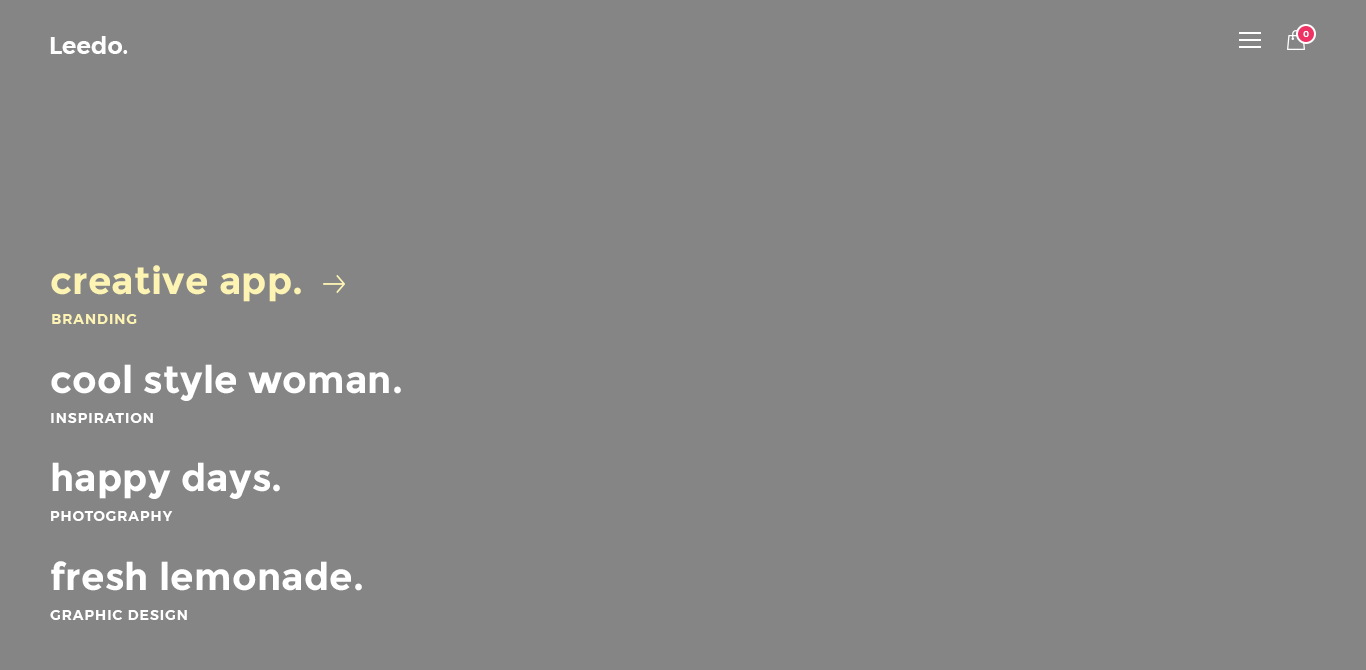
<style>
.page{position:relative;width:1366px;height:670px;background:#858585}
.page>*{position:absolute;margin:0}
.t1{font:24px "Montserrat-SemiBold";color:#ffffff}
.t2{font:8px "Montserrat-Medium";letter-spacing:0.05em;color:#ffffff;text-transform:uppercase}
.t3{font:38px "Montserrat-Bold";letter-spacing:0.005em;color:#fdf4b4}
.t4{font:14px "Montserrat-SemiBold";letter-spacing:0.075em;color:#fdf4b4;text-transform:uppercase}
.t5{font:38px "Montserrat-Bold";letter-spacing:0.005em;color:#ffffff}
.t6{font:14px "Montserrat-SemiBold";letter-spacing:0.075em;color:#ffffff;text-transform:uppercase}
</style>
<div class="page">
<p class="t1" style="left:50px;top:36px;width:78px;height:18px">Leedo.</p>
<p class="t2" style="left:1303px;top:31px;width:6px;height:6px">0</p>
<p class="t3" style="left:51px;top:265px;width:250px;height:37px">creative app.</p>
<p class="t4" style="left:52px;top:314px;width:85px;height:10px">branding</p>
<p class="t5" style="left:51px;top:364px;width:350px;height:37px">cool style woman.</p>
<p class="t6" style="left:51px;top:413px;width:102px;height:10px">inspiration</p>
<p class="t5" style="left:52px;top:462px;width:228px;height:37px">happy days.</p>
<p class="t6" style="left:51px;top:511px;width:122px;height:10px">photography</p>
<p class="t5" style="left:51px;top:561px;width:311px;height:30px">fresh lemonade.</p>
<p class="t6" style="left:50px;top:610px;width:137px;height:10px">graphic design</p>
</div>
